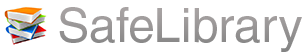
<style>
.page{position:relative;width:302px;height:52px;background:#ffffff}
.page>*{position:absolute;margin:0}
.t1{font:48px "Helvetica";color:#979595}
</style>
<div class="page">
<p class="t1" style="left:59px;top:7px;width:243px;height:45px">SafeLibrary</p>
</div>
